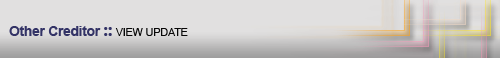
<style>
.page{position:relative;width:500px;height:58px;background:#e1e0e0}
.page>*{position:absolute;margin:0}
.t1{font:14px "Arial-BoldMT";letter-spacing:-0.025em;color:#333366}
.t2{font:18px "SegoeUI-Bold";letter-spacing:-0.025em;color:#333366}
.t3{font:11px "ArialMT";letter-spacing:-0.025em;color:#070707}
</style>
<div class="page">
<p class="t1" style="left:9px;top:26px;width:179px;height:10px">Other Creditor <span class="t2">:: </span><span class="t3">VIEW UPDATE</span></p>
</div>
